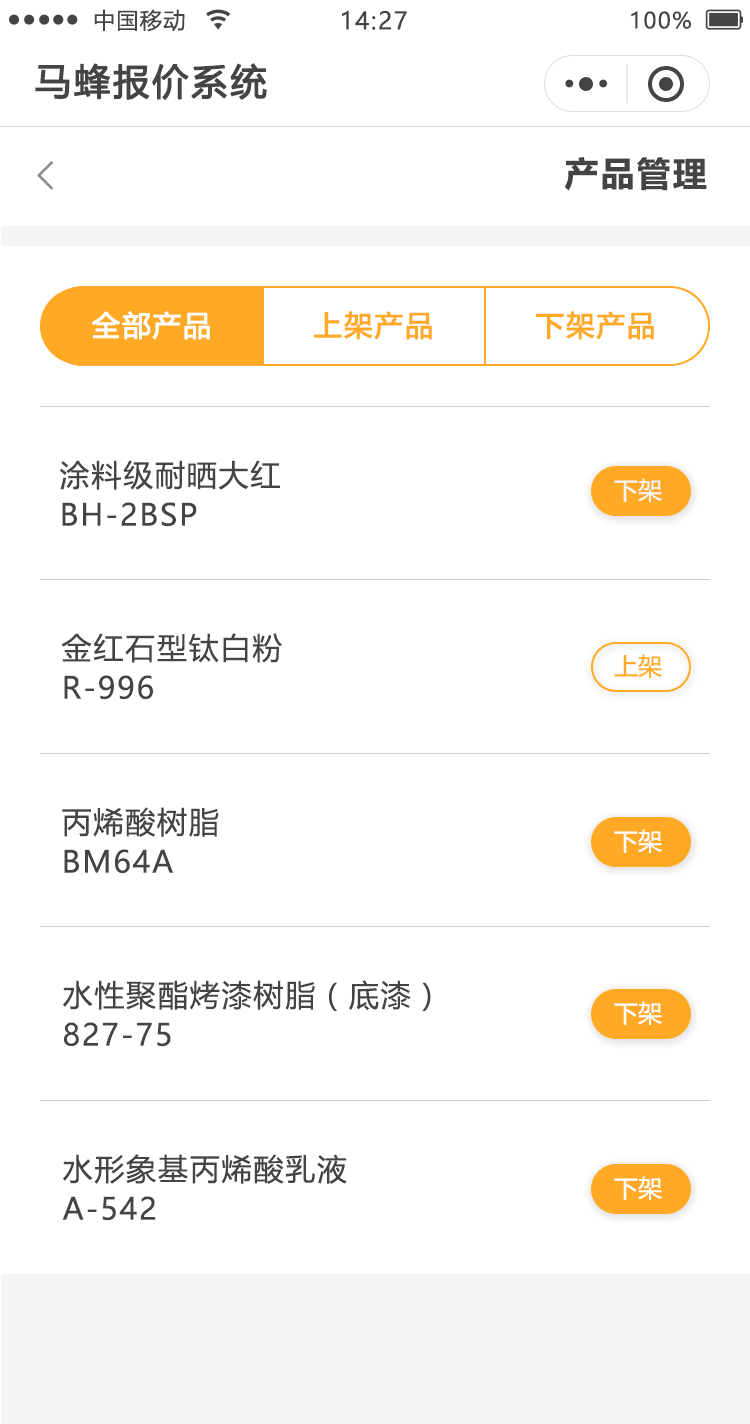
<style>
.page{position:relative;width:750px;height:1424px;background:#ffffff}
.page>*{position:absolute;margin:0}
.t1{font:22px "MicrosoftYaHeiUI";letter-spacing:0.06em;color:#444444}
.t2{font:24px "MicrosoftYaHeiUI";letter-spacing:0.06em;color:#444444}
.t3{font:36px "MicrosoftYaHeiUI";letter-spacing:0.06em;color:#444444;font-weight:bold}
.t4{font:39.2px "FangSong";letter-spacing:0.1em;color:#8c8c8c;font-weight:bold}
.t5{font:34px "MicrosoftYaHeiUI-Bold";letter-spacing:0.06em;color:#444444}
.t6{font:28px "MicrosoftYaHeiUI";letter-spacing:0.06em;color:#ffffff;font-weight:bold}
.t7{font:28px "MicrosoftYaHeiUI";letter-spacing:0.06em;color:#ffa924;font-weight:bold}
.t8{font:30px/40px "MicrosoftYaHeiUI";letter-spacing:0.06em;color:#444444}
.t9{font:24px "MicrosoftYaHeiUI";color:#f5f5f5}
.t10{font:24px "MicrosoftYaHeiUI";color:#ffa924}
.t11{font:24px "MicrosoftYaHeiUI";color:#ffffff}
</style>
<div class="page">
<p class="t1" style="left:94px;top:9px;width:91px;height:23px">中国移动</p>
<p class="t2" style="left:342px;top:10px;width:65px;height:20px">14:27</p>
<p class="t1" style="left:631px;top:11px;width:60px;height:18px">100%</p>
<p class="t3" style="left:35px;top:63px;width:232px;height:37px">马蜂报价系统</p>
<p class="t4" style="left:37px;top:161px;width:16px;height:29px">&lt;</p>
<p class="t5" style="left:564px;top:157px;width:143px;height:34px">产品管理</p>
<p class="t6" style="left:91px;top:311px;width:119px;height:29px">全部产品</p>
<p class="t7" style="left:314px;top:311px;width:118px;height:29px">上架产品</p>
<p class="t7" style="left:536px;top:311px;width:118px;height:29px">下架产品</p>
<p class="t8" style="left:60px;top:460px;width:220px;height:67px">涂料级耐晒大红<br>BH-2BSP</p>
<p class="t9" style="left:614px;top:478px;width:48px;height:24px">下架</p>
<p class="t8" style="left:61px;top:633px;width:221px;height:67px">金红石型钛白粉<br>R-996</p>
<p class="t10" style="left:614px;top:654px;width:48px;height:24px">上架</p>
<p class="t8" style="left:62px;top:807px;width:157px;height:67px">丙烯酸树脂<br>BM64A</p>
<p class="t11" style="left:614px;top:829px;width:48px;height:24px">下架</p>
<p class="t8" style="left:63px;top:980px;width:368px;height:67px">水性聚酯烤漆树脂（底漆）<br>827-75</p>
<p class="t11" style="left:614px;top:1001px;width:48px;height:24px">下架</p>
<p class="t8" style="left:62px;top:1154px;width:285px;height:67px">水形象基丙烯酸乳液<br>A-542</p>
<p class="t11" style="left:614px;top:1176px;width:48px;height:24px">下架</p>
</div>
